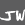
<style>
.page{position:relative;width:25px;height:25px;background:#5d5d5e}
.page>*{position:absolute;margin:0}
.t1{font:21px "John_Walton_Print";letter-spacing:-0.01em;color:#ffffff}
</style>
<div class="page">
<p class="t1" style="left:0px;top:9px;width:25px;height:12px">JW</p>
<p class="t1" style="left:0px;top:11px;width:16px;height:10px">J</p>
</div>
